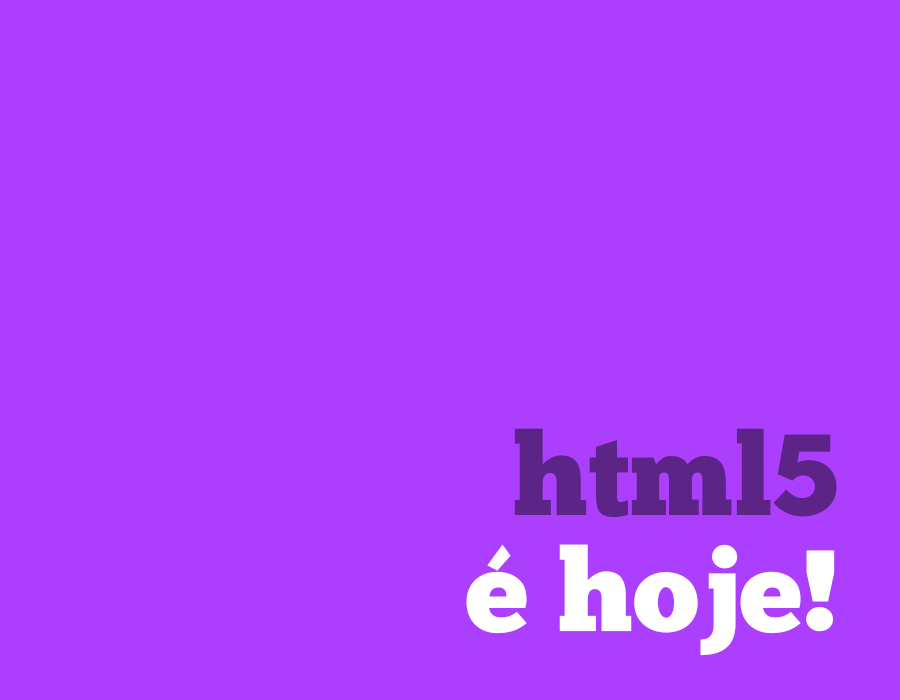
<style>
.page{position:relative;width:900px;height:700px;background:#ac3ffe}
.page>*{position:absolute;margin:0}
.t1{font:115.1px/116.3px "ChunkFive-Roman";color:#ffffff}
.t2{font:115.1px/116.3px "ChunkFive-Roman";color:#5d2488}
</style>
<div class="page">
<p class="t1" style="left:466px;top:428px;width:371px;height:228px;text-align:right"><span class="t2">html5</span><br>é hoje!</p>
</div>
